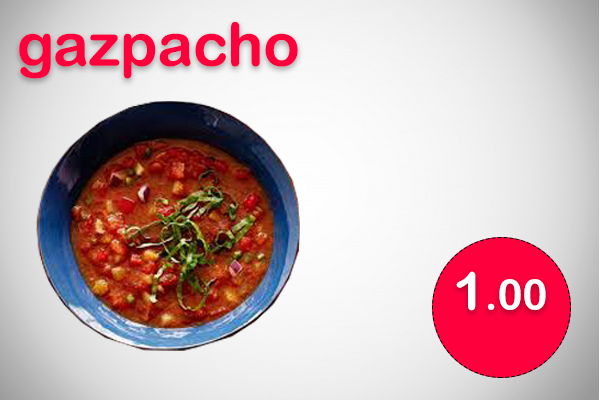
<style>
.page{position:relative;width:600px;height:400px}
.page>*{position:absolute;margin:0}
.t1{font:60px "ArialRoundedMTBold";color:#fe013d}
.t2{font:41.9px "ArialRoundedMTBold";color:#ffffff}
.t3{font:52.3px "ArialRoundedMTBold";color:#ffffff}
</style>
<div class="page">
<p class="t1" style="left:19px;top:21px;width:279px;height:58px">gazpacho</p>
<p class="t2" style="left:456px;top:271px;width:90px;height:40px"><span class="t3">1</span>.00</p>
</div>
